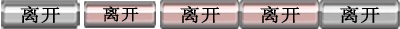
<style>
.page{position:relative;width:400px;height:29px}
.page>*{position:absolute;margin:0}
.t1{font:17.8px "SimSun";color:#000000;font-weight:bold;scale:1.14 1}
.t2{font:16px "SimSun";color:#000000;font-weight:bold;scale:1.14 1}
</style>
<div class="page">
<p class="t1" style="left:20px;top:6px;width:40px;height:17px">离开</p>
<p class="t2" style="left:103px;top:6px;width:36px;height:16px">离开</p>
<p class="t1" style="left:180px;top:6px;width:40px;height:17px">离开</p>
<p class="t1" style="left:260px;top:6px;width:40px;height:17px">离开</p>
<p class="t1" style="left:340px;top:6px;width:40px;height:17px">离开</p>
</div>
